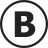
<style>
.page{position:relative;width:48px;height:48px;background:#ffffff}
.page>*{position:absolute;margin:0}
.t1{font:35.6px "Tahoma-Bold";color:#222222}
</style>
<div class="page">
<p class="t1" style="left:14px;top:11px;width:22px;height:26px">В</p>
</div>
